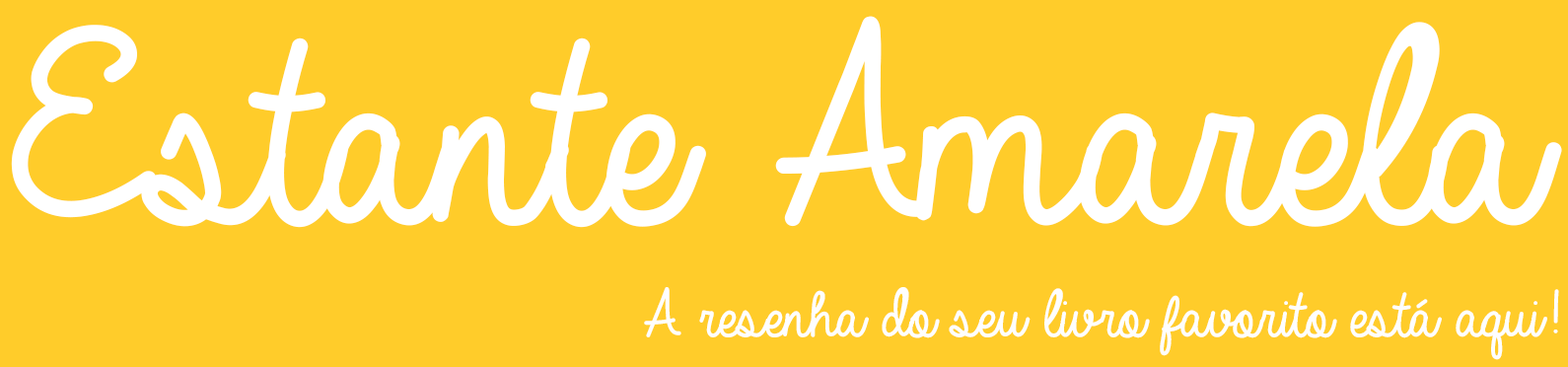
<style>
.page{position:relative;width:1568px;height:367px;background:#ffcc2a}
.page>*{position:absolute;margin:0}
.t1{font:295.8px "AlwaysInMyHeart";color:#ffffff}
.t2{font:71px "AlwaysInMyHeart";color:#fefefe}
</style>
<div class="page">
<p class="t1" style="left:11px;top:16px;width:1551px;height:212px">Estante Amarela</p>
<p class="t2" style="left:644px;top:287px;width:915px;height:73px">A resenha do seu livro favorito está aqui!</p>
</div>
